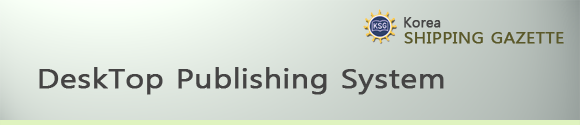
<style>
.page{position:relative;width:580px;height:125px}
.page>*{position:absolute;margin:0}
.t1{font:14px "MalgunGothicRegular";color:#454444;font-weight:bold}
.t2{font:15px "MalgunGothicRegular";color:#5a5829;font-weight:bold;scale:1.16 1}
.t3{font:26.7px "MalgunGothicRegular";color:#454444;font-weight:bold;scale:1.16 1}
</style>
<div class="page">
<p class="t1" style="left:404px;top:17px;width:37px;height:11px">Korea</p>
<p class="t2" style="left:404px;top:32px;width:160px;height:12px">SHIPPING GAZETTE</p>
<p class="t3" style="left:39px;top:67px;width:405px;height:28px">DeskTop Publishing System</p>
</div>
